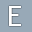
<style>
.page{position:relative;width:32px;height:32px;background:#98a9b7}
.page>*{position:absolute;margin:0}
.t1{font:28px "TrebuchetMS";color:#ffffff}
</style>
<div class="page">
<p class="t1" style="left:9px;top:6px;width:12px;height:20px">E</p>
</div>
